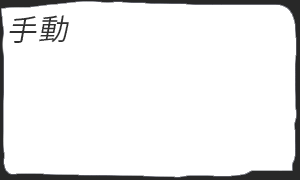
<style>
.page{position:relative;width:300px;height:180px;background:#ffffff}
.page>*{position:absolute;margin:0}
.t1{font:29.2px "KozGoPr6N-Regular";letter-spacing:0.05em;color:#2f2f2f;font-style:italic}
</style>
<div class="page">
<p class="t1" style="left:9px;top:15px;width:60px;height:28px">手動</p>
</div>
